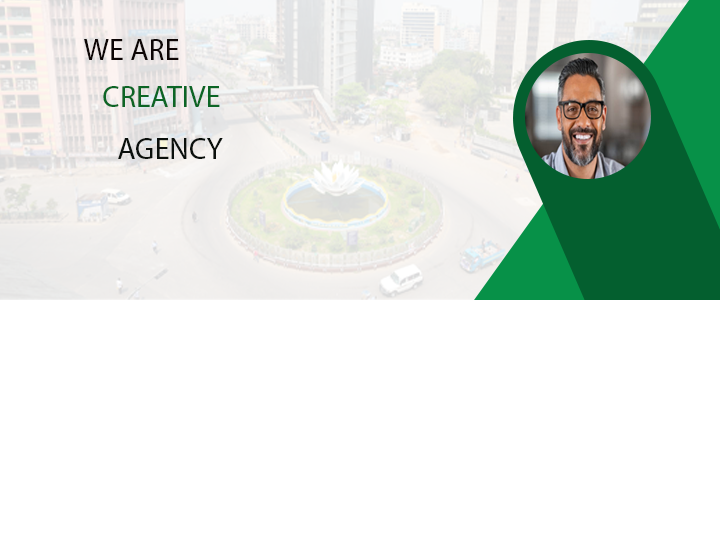
<style>
.page{position:relative;width:720px;height:544px;background:#ffffff}
.page>*{position:absolute;margin:0}
.t1{font:30px "MyriadPro-Regular";color:#0d0605}
.t2{font:30px "MyriadPro-Regular";color:#0c6525}
.t3{font:30px "MyriadPro-Regular";color:#0b100c}
</style>
<div class="page">
<p class="t1" style="left:84px;top:39px;width:95px;height:21px">WE ARE</p>
<p class="t2" style="left:103px;top:86px;width:117px;height:21px">CREATIVE</p>
<p class="t3" style="left:118px;top:138px;width:105px;height:21px">AGENCY</p>
</div>
